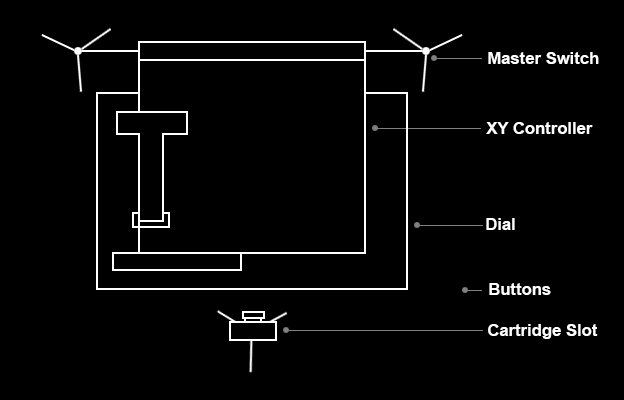
<style>
.page{position:relative;width:624px;height:400px;background:#000000}
.page>*{position:absolute;margin:0}
.t1{font:16.7px "Arial-BoldMT";color:#ffffff}
</style>
<div class="page">
<p class="t1" style="left:488px;top:52px;width:111px;height:12px">Master Switch</p>
<p class="t1" style="left:486px;top:122px;width:107px;height:12px">XY Controller</p>
<p class="t1" style="left:486px;top:218px;width:29px;height:12px">Dial</p>
<p class="t1" style="left:489px;top:283px;width:62px;height:12px">Buttons</p>
<p class="t1" style="left:488px;top:324px;width:110px;height:15px">Cartridge Slot</p>
</div>
